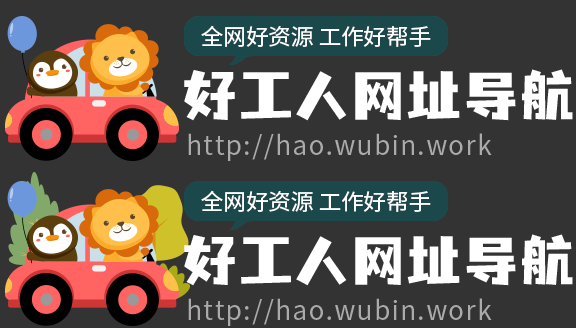
<style>
.page{position:relative;width:576px;height:328px;background:#333333}
.page>*{position:absolute;margin:0}
.t1{font:22.5px "SourceHanSansCN-Regular";color:#ffffff}
.t2{font:56.2px "YS-HelloFont-BangBangTi";color:#ffffff}
.t3{font:26.2px "SourceHanSansCN-Regular";letter-spacing:0.05em;color:#ababab}
</style>
<div class="page">
<p class="t1" style="left:201px;top:25px;width:230px;height:22px">全网好资源 工作好帮手</p>
<p class="t2" style="left:184px;top:69px;width:389px;height:52px">好工人网址导航</p>
<p class="t3" style="left:188px;top:133px;width:304px;height:28px">http://hao.wubin.work</p>
</div>
